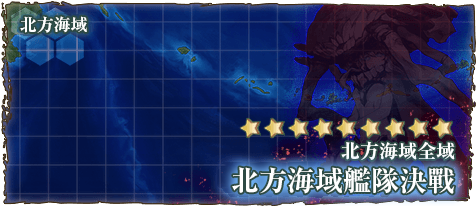
<style>
.page{position:relative;width:476px;height:206px}
.page>*{position:absolute;margin:0}
.t1{font:17px "RyuminPr6N-ExBold";color:#ffffff}
.t2{font:19px "RyuminPro-ExBold";color:#ffffff}
.t3{font:28px "RyuminPro-ExBold";color:#ffffff}
</style>
<div class="page">
<p class="t1" style="left:20px;top:16px;width:67px;height:17px">北方海域</p>
<p class="t2" style="left:341px;top:141px;width:114px;height:19px">北方海域全域</p>
<p class="t3" style="left:232px;top:167px;width:223px;height:27px">北方海域艦隊決戰</p>
</div>
